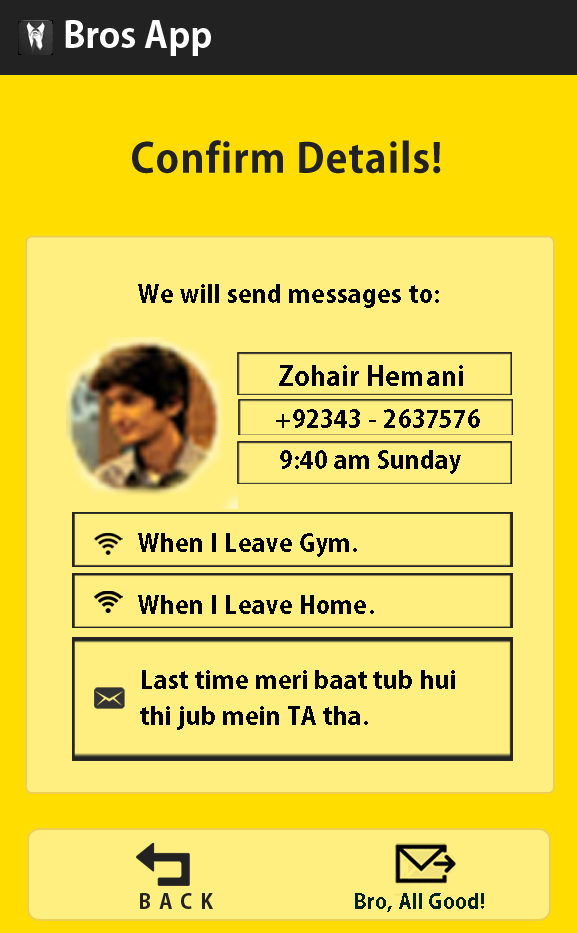
<style>
.page{position:relative;width:577px;height:933px;background:#ffee80}
.page>*{position:absolute;margin:0}
.t1{font:36px "AdobeGothicStd-Bold";color:#ffffff}
.t2{font:40px "AdobeGothicStd-Bold";letter-spacing:0.025em;color:#222222}
.t3{font:24px "AdobeGothicStd-Bold";letter-spacing:0.025em;color:#000000}
.t4{font:26.3px "AdobeGothicStd-Bold";letter-spacing:0.025em;color:#000000}
.t5{font:24px/62px "AdobeGothicStd-Bold";letter-spacing:0.025em;color:#000000}
.t6{font:24px/36px "AdobeGothicStd-Bold";letter-spacing:0.025em;color:#000000}
.t7{font:20px "AdobeGothicStd-Bold";letter-spacing:0.4em;color:#222222}
.t8{font:20px "AdobeGothicStd-Bold";letter-spacing:0.025em;color:#022222}
</style>
<div class="page">
<p class="t1" style="left:65px;top:20px;width:146px;height:36px">Bros App</p>
<p class="t2" style="left:132px;top:140px;width:309px;height:34px">Confirm Details!</p>
<p class="t3" style="left:138px;top:284px;width:301px;height:24px">We will send messages to:</p>
<p class="t4" style="left:279px;top:365px;width:184px;height:21px">Zohair Hemani</p>
<p class="t3" style="left:276px;top:409px;width:204px;height:19px">+92343 - 2637576</p>
<p class="t3" style="left:280px;top:450px;width:181px;height:24px">9:40 am Sunday</p>
<p class="t5" style="left:138px;top:533px;width:236px;height:81px">When I Leave Gym.<br>When I Leave Home.</p>
<p class="t6" style="left:140px;top:670px;width:315px;height:60px">Last time meri baat tub hui<br>thi jub mein TA tha.</p>
<p class="t7" style="left:140px;top:893px;width:73px;height:16px">BACK</p>
<p class="t8" style="left:355px;top:893px;width:129px;height:19px">Bro, All Good!</p>
</div>
